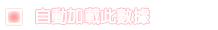
<style>
.page{position:relative;width:218px;height:30px;background:#ffffff}
.page>*{position:absolute;margin:0}
.t1{font:16px "AdobeFanHeitiStd-Bold";color:#ffffff;font-weight:bold}
</style>
<div class="page">
<p class="t1" style="left:36px;top:8px;width:114px;height:17px">自動加載此數據</p>
</div>
